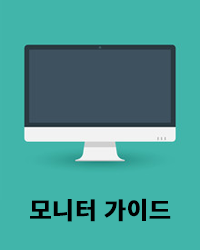
<style>
.page{position:relative;width:200px;height:250px;background:#41b5aa}
.page>*{position:absolute;margin:0}
.t1{font:24px "SpoqaHanSansNeo-Bold";color:#000000;font-weight:bold}
</style>
<div class="page">
<p class="t1" style="left:30px;top:198px;width:141px;height:24px">모니터 가이드</p>
</div>
